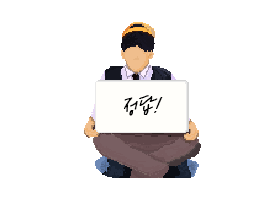
<style>
.page{position:relative;width:275px;height:197px;background:#ffffff}
.page>*{position:absolute;margin:0}
.t1{font:24px "SDGongTabTTF-aLt";letter-spacing:-0.03em;color:#000000;font-weight:bold;font-style:italic}
</style>
<div class="page">
<p class="t1" style="left:124px;top:95px;width:39px;height:21px">정답!</p>
</div>
